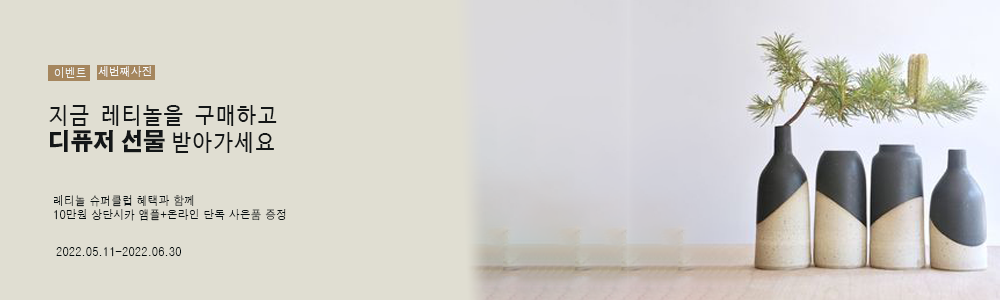
<style>
.page{position:relative;width:1000px;height:300px;background:#e0ded2}
.page>*{position:absolute;margin:0}
.t1{font:12px "Haansoft-Dotum";letter-spacing:0.01em;color:#eff4f5;text-transform:uppercase;scale:0.9 1}
.t2{font:12px "Haansoft-Dotum";letter-spacing:0.01em;color:#f7f9fa;text-transform:uppercase;scale:0.9 1}
.t3{font:23px/26.8px "D2Codingligature";letter-spacing:0.01em;color:#131617;text-transform:uppercase;scale:0.9 1}
.t4{font:24px/26.8px "AdobeGothicStd-Bold";letter-spacing:0.01em;color:#131617;text-transform:uppercase;font-weight:bold;scale:0.9 1}
.t5{font:12px/14px "Haansoft-Dotum";letter-spacing:0.01em;color:#070f11;text-transform:uppercase;scale:0.9 1}
.t6{font:12px "Haansoft-Dotum";letter-spacing:0.01em;color:#020a0c;text-transform:uppercase;scale:0.9 1}
</style>
<div class="page">
<p class="t1" style="left:54px;top:67px;width:32px;height:11px">이벤트</p>
<p class="t2" style="left:98px;top:66px;width:53px;height:11px">세번째사진</p>
<p class="t3" style="left:49px;top:105px;width:228px;height:48px">지금 레티놀을 구매하고<br><span class="t4">디퓨저 선물 </span>받아가세요</p>
<p class="t5" style="left:54px;top:195px;width:232px;height:26px">레티놀 슈퍼클럽 혜택과 함께<br>10만원 상단시카 앰플+온라인 단독 사은품 증정</p>
<p class="t6" style="left:56px;top:247px;width:125px;height:10px">2022.05.11-2022.06.30</p>
</div>
